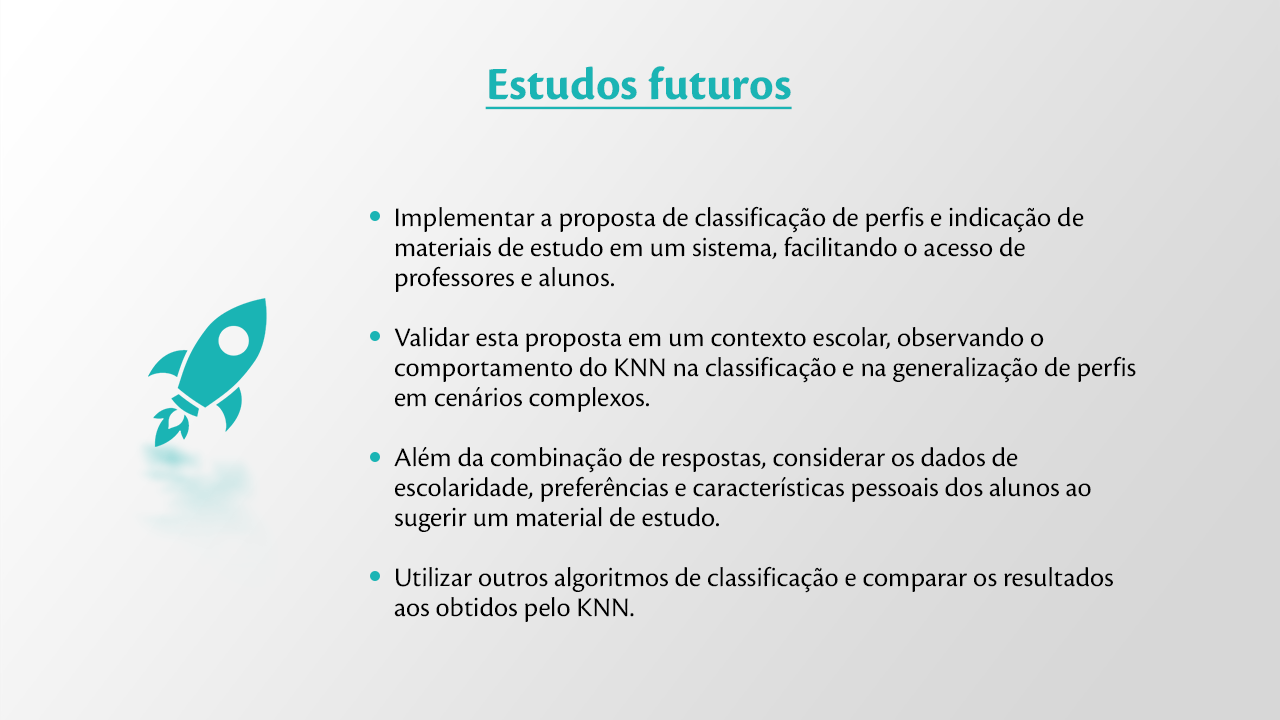
<style>
.page{position:relative;width:1280px;height:720px}
.page>*{position:absolute;margin:0}
.t1{font:48px "CronosPro-Bold";color:#1ab4b4;text-decoration:underline}
.t2{font:28px/30px "CronosPro-Regular";color:#000000}
</style>
<div class="page">
<p class="t1" style="left:485px;top:66px;width:307px;height:44px">Estudos futuros</p>
<p class="t2" style="left:394px;top:206px;width:742px;height:416px">Implementar a proposta de classificação de perfis e indicação de materiais de estudo em um sistema, facilitando o acesso de professores e alunos.<br><br>Validar esta proposta em um contexto escolar, observando o comportamento do KNN na classificação e na generalização de perfis em cenários complexos.<br><br>Além da combinação de respostas, considerar os dados de escolaridade, preferências e características pessoais dos alunos ao sugerir um material de estudo.<br><br>Utilizar outros algoritmos de classificação e comparar os resultados aos obtidos pelo KNN.</p>
</div>
